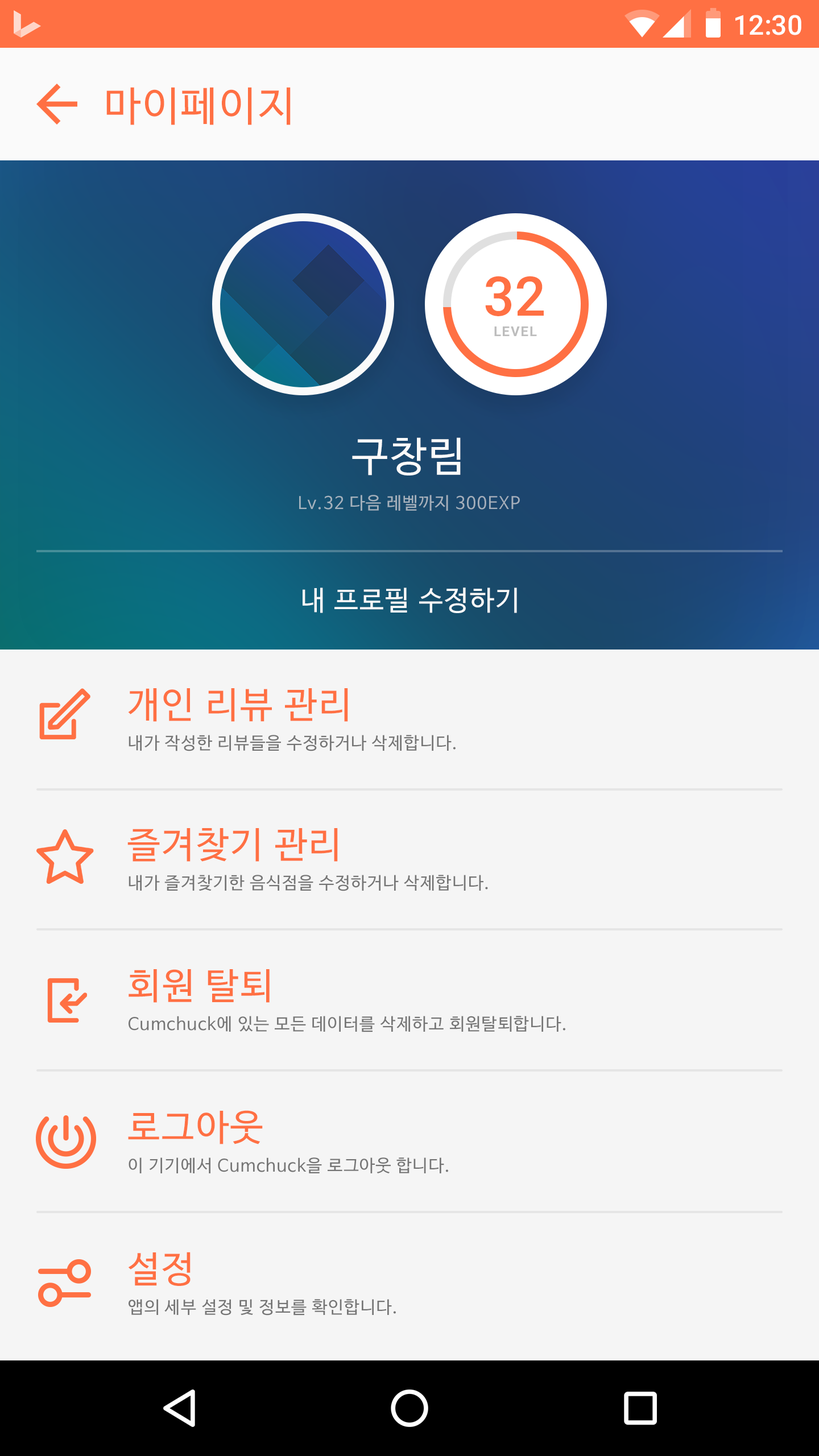
<style>
.page{position:relative;width:819px;height:1456px;background:#f5f5f5}
.page>*{position:absolute;margin:0}
.t1{font:27.3px "Roboto-Medium";color:#ffffff}
.t2{font:40.9px "NanumBarunGothic";letter-spacing:0.05em;color:#ff7043}
.t3{font:54.6px "Roboto-Medium";color:#ff7043}
.t4{font:13.6px "Roboto-Bold";letter-spacing:0.075em;color:#bdbdbd}
.t5{font:40.9px "NanumBarunGothic";letter-spacing:0.05em;color:#fafafa}
.t6{font:17.1px "NanumBarunGothic";letter-spacing:0.05em;color:#a4b1bc}
.t7{font:27.3px "NanumBarunGothic";letter-spacing:0.05em;color:#fafafa}
.t8{font:36.4px "NanumBarunGothic";letter-spacing:0.05em;color:#ff7043}
.t9{font:17.1px "NanumBarunGothic";letter-spacing:0.05em;color:#757575}
</style>
<div class="page">
<p class="t1" style="left:735px;top:15px;width:66px;height:20px">12:30</p>
<p class="t2" style="left:106px;top:87px;width:185px;height:38px">마이페이지</p>
<p class="t3" style="left:485px;top:276px;width:59px;height:40px">32</p>
<p class="t4" style="left:494px;top:326px;width:43px;height:10px">LEVEL</p>
<p class="t5" style="left:352px;top:437px;width:109px;height:38px">구창림</p>
<p class="t6" style="left:299px;top:495px;width:221px;height:16px">Lv.32 다음 레벨까지 300EXP</p>
<p class="t7" style="left:303px;top:588px;width:214px;height:25px">내 프로필 수정하기</p>
<p class="t8" style="left:128px;top:688px;width:220px;height:34px">개인 리뷰 관리</p>
<p class="t9" style="left:129px;top:735px;width:327px;height:16px">내가 작성한 리뷰들을 수정하거나 삭제합니다.</p>
<p class="t8" style="left:127px;top:828px;width:211px;height:34px">즐겨찾기 관리</p>
<p class="t9" style="left:129px;top:875px;width:359px;height:16px">내가 즐겨찾기한 음식점을 수정하거나 삭제합니다.</p>
<p class="t8" style="left:129px;top:969px;width:141px;height:34px">회원 탈퇴</p>
<p class="t9" style="left:129px;top:1016px;width:436px;height:16px">Cumchuck에 있는 모든 데이터를 삭제하고 회원탈퇴합니다.</p>
<p class="t8" style="left:128px;top:1110px;width:135px;height:34px">로그아웃</p>
<p class="t9" style="left:129px;top:1157px;width:319px;height:16px">이 기기에서 Cumchuck을 로그아웃 합니다.</p>
<p class="t8" style="left:128px;top:1252px;width:63px;height:34px">설정</p>
<p class="t9" style="left:129px;top:1299px;width:267px;height:17px">앱의 세부 설정 및 정보를 확인합니다.</p>
</div>
